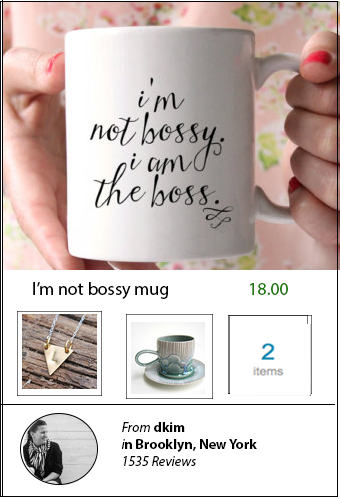
<style>
.page{position:relative;width:340px;height:500px;background:#ffffff}
.page>*{position:absolute;margin:0}
.t1{font:18px "MyriadPro-Regular";color:#000000}
.t2{font:18px "MyriadPro-Regular";color:#1b7a09}
.t3{font:18px "MyriadPro-Bold";color:#0e8d14}
.t4{font:14px "MyriadPro-Bold";color:#000000}
.t5{font:14px "MyriadPro-It";color:#000000}
</style>
<div class="page">
<p class="t1" style="left:33px;top:282px;width:255px;height:17px">I’m not bossy mug   <span class="t2">18.00    </span><span class="t3">32.00</span></p>
<p class="t4" style="left:121px;top:422px;width:136px;height:44px"><span class="t5"><br>From</span> dkim <br><span class="t5">i</span>n Brooklyn, New York<br><span class="t5">1535 Reviews</span></p>
</div>
